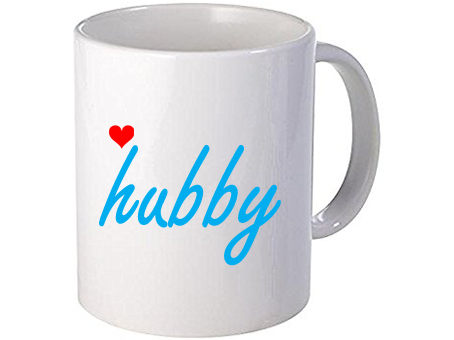
<style>
.page{position:relative;width:454px;height:340px;background:#ffffff}
.page>*{position:absolute;margin:0}
.t1{font:135.7px "FreestyleScript-Regular";color:#00aeef;scale:0.92 1}
</style>
<div class="page">
<p class="t1" style="left:99px;top:144px;width:182px;height:122px">hubby</p>
</div>
